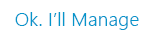
<style>
.page{position:relative;width:150px;height:40px;background:#ffffff}
.page>*{position:absolute;margin:0}
.t1{font:19.4px "SegoeUI-Semilight";color:#0595cb}
</style>
<div class="page">
<p class="t1" style="left:15px;top:12px;width:124px;height:18px">Ok. I’ll Manage</p>
</div>
